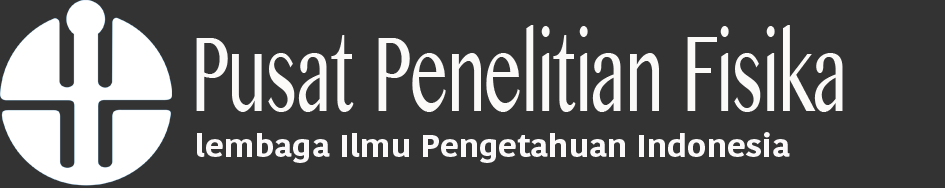
<style>
.page{position:relative;width:945px;height:188px;background:#333333}
.page>*{position:absolute;margin:0}
.t1{font:107.7px "MyanmarMN";color:#fcf9f9;scale:0.61 1}
.t2{font:30.8px "KohinoorDevanagari-Bold";color:#fbf9f9;scale:1.07 1}
</style>
<div class="page">
<p class="t1" style="left:196px;top:25px;width:647px;height:87px">Pusat Penelitian Fisika</p>
<p class="t2" style="left:197px;top:132px;width:593px;height:31px">lembaga Ilmu Pengetahuan Indonesia</p>
</div>
